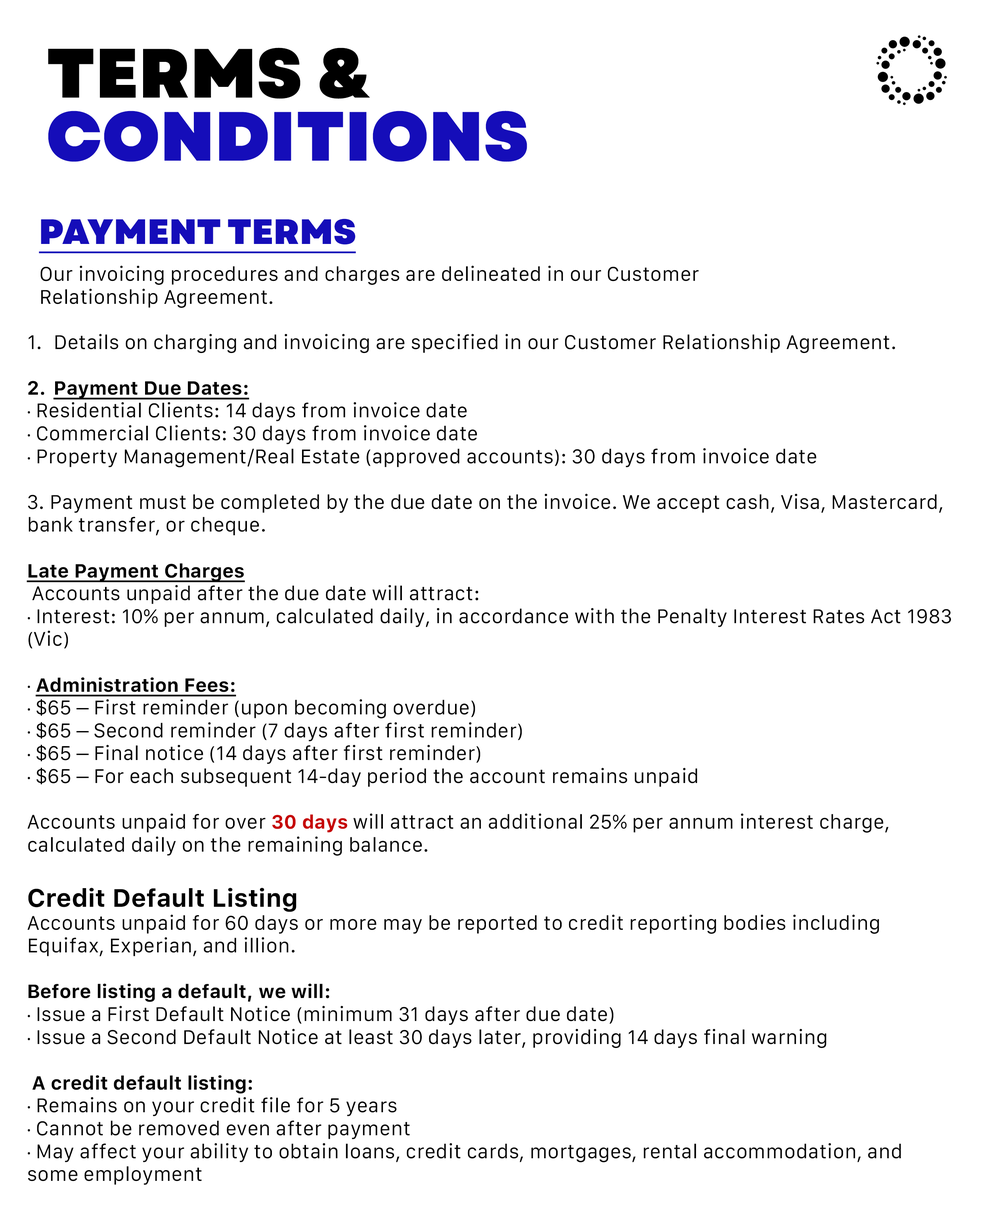
<style>
.page{position:relative;width:983px;height:1213px;background:#ffffff}
.page>*{position:absolute;margin:0}
.t1{font:69.5px/63.1px "Garet-Heavy";letter-spacing:0.005em;color:#150db9}
.t2{font:69.5px/63.1px "Garet-Heavy";letter-spacing:0.005em;color:#000000}
.t3{font:35.1px "Garet-Heavy";letter-spacing:0.005em;color:#150db9;text-decoration:underline}
.t4{font:19px "Galvji";letter-spacing:0.005em;color:#000000}
.t5{font:19px "Galvji-Bold";letter-spacing:0.005em;color:#000000;text-decoration:underline}
.t6{font:19px "MyriadPro-Regular";letter-spacing:0.005em;color:#000000}
.t7{font:19px "Galvji-Bold";letter-spacing:0.005em;color:#c60202}
.t8{font:25px "Galvji-Bold";letter-spacing:0.005em;color:#000000}
.t9{font:19px "Galvji-Bold";letter-spacing:0.005em;color:#000000}
</style>
<div class="page">
<p class="t1" style="left:48px;top:48px;width:479px;height:114px;text-align:justify"><span class="t2">TERMS &amp;<br></span>CONDITIONS</p>
<p class="t3" style="left:39px;top:218px;width:317px;height:35px">PAYMENT TERMS</p>
<p class="t4" style="left:40px;top:265px;width:659px;height:43px">Our invoicing procedures and charges are delineated in our Customer<br>Relationship Agreement.</p>
<p class="t4" style="left:27px;top:333px;width:925px;height:851px">Details on charging and invoicing are specified in our Customer Relationship Agreement.<br><br><span class="t5">Payment Due Dates:<br></span><span class="t6">∙</span> Residential Clients: 14 days from invoice date<br><span class="t6">∙</span> Commercial Clients: 30 days from invoice date<br><span class="t6">∙</span> Property Management/Real Estate (approved accounts): 30 days from invoice date<br><br>3. Payment must be completed by the due date on the invoice. We accept cash, Visa, Mastercard, bank transfer, or cheque.<br><br><span class="t5">Late Payment Charges<br></span> Accounts unpaid after the due date will attract:<br><span class="t6">∙</span> Interest: 10% per annum, calculated daily, in accordance with the Penalty Interest Rates Act 1983 (Vic)<br><br><span class="t6">∙ </span><span class="t5">Administration Fees:<br></span><span class="t6">∙</span> $65 – First reminder (upon becoming overdue)<br><span class="t6">∙</span> $65 – Second reminder (7 days after first reminder)<br><span class="t6">∙</span> $65 – Final notice (14 days after first reminder)<br><span class="t6">∙</span> $65 – For each subsequent 14-day period the account remains unpaid<br><br>Accounts unpaid for over<span class="t7"> 30 days</span> will attract an additional 25% per annum interest charge, calculated daily on the remaining balance.<br><br><span class="t8">Credit Default Listing<br></span>Accounts unpaid for 60 days or more may be reported to credit reporting bodies including Equifax, Experian, and illion.<br><br><span class="t9">Before listing a default, we will:<br></span><span class="t6">∙</span> Issue a First Default Notice (minimum 31 days after due date)<br><span class="t6">∙</span> Issue a Second Default Notice at least 30 days later, providing 14 days final warning<br><br><span class="t9"> A credit default listing:<br></span><span class="t6">∙</span> Remains on your credit file for 5 years<br><span class="t6">∙</span> Cannot be removed even after payment<br><span class="t6">∙</span> May affect your ability to obtain loans, credit cards, mortgages, rental accommodation, and some employment</p>
</div>
